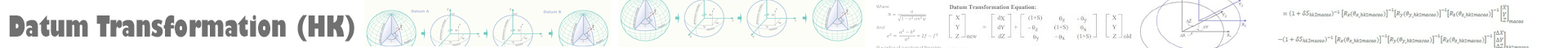
<style>
.page{position:relative;width:1568px;height:48px;background:#ffffff}
.page>*{position:absolute;margin:0}
.t1{font:28.3px "GillSans-UltraBoldCondensed";color:#707070}
</style>
<div class="page">
<p class="t1" style="left:9px;top:15px;width:345px;height:27px">Datum Transformation (HK)</p>
</div>
